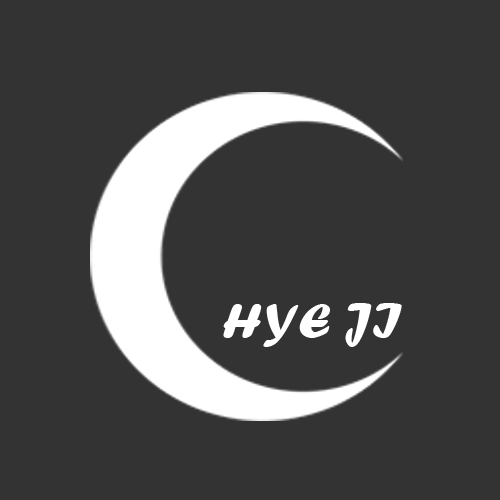
<style>
.page{position:relative;width:500px;height:500px;background:#333333}
.page>*{position:absolute;margin:0}
.t1{font:50px "ForteMT";color:#ffffff;scale:1.05 1}
</style>
<div class="page">
<p class="t1" style="left:223px;top:303px;width:179px;height:44px">HYE JI</p>
</div>
